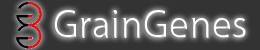
<style>
.page{position:relative;width:260px;height:50px;background:#333333}
.page>*{position:absolute;margin:0}
.t1{font:40.3px "MyriadPro-Regular";color:#ffffff}
</style>
<div class="page">
<p class="t1" style="left:53px;top:10px;width:193px;height:28px">GrainGenes</p>
</div>
